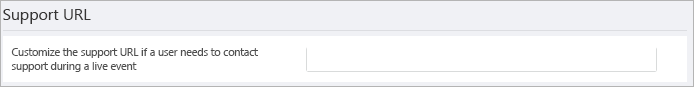
<style>
.page{position:relative;width:694px;height:87px;background:#ffffff}
.page>*{position:absolute;margin:0}
.t1{font:15.8px "SegoeUI";color:#363535}
.t2{font:10.5px/14px "SegoeUI";color:#505050}
</style>
<div class="page">
<p class="t1" style="left:3px;top:9px;width:88px;height:15px">Support URL</p>
<p class="t2" style="left:11px;top:48px;width:247px;height:24px">Customize the support URL if a user needs to contact<br>support during a live event</p>
</div>
